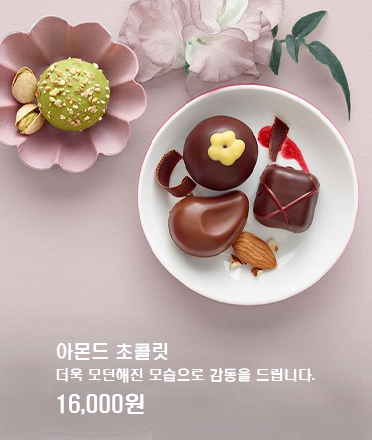
<style>
.page{position:relative;width:372px;height:440px}
.page>*{position:absolute;margin:0}
.t1{font:14px/25px "H2hdrM";color:#ffffff}
.t2{font:18px/25px "H2hdrM";color:#ffffff}
.t3{font:22px/25px "H2hdrM";color:#ffffff}
</style>
<div class="page">
<p class="t1" style="left:56px;top:343px;width:259px;height:72px"><span class="t2">아몬드 초콜릿<br></span>더욱 모던해진 모습으로 감동을 드립니다.<br><span class="t3">16,000원</span></p>
</div>
